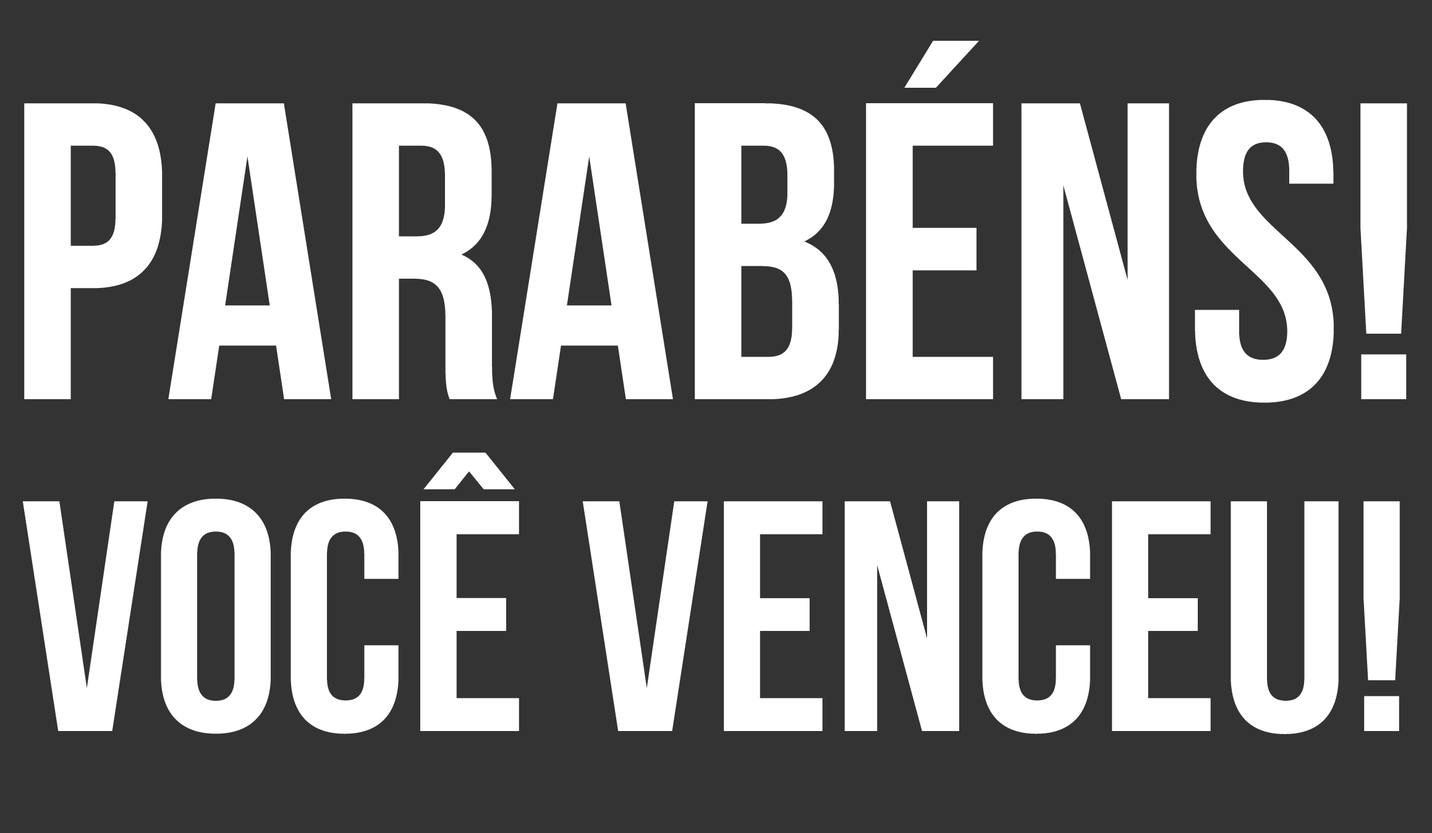
<style>
.page{position:relative;width:1432px;height:833px;background:#333333}
.page>*{position:absolute;margin:0}
.t1{font:328.2px/332px "BebasNeueBold";color:#ffffff}
.t2{font:422.7px/332px "BebasNeueBold";color:#ffffff}
</style>
<div class="page">
<p class="t1" style="left:23px;top:41px;width:1384px;height:693px;text-align:center"><span class="t2">Parabéns!<br></span>Você venceu!</p>
</div>
